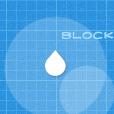
<style>
.page{position:relative;width:114px;height:114px}
.page>*{position:absolute;margin:0}
.t1{font:8px "FanboyHardcore";letter-spacing:0.05em;color:#a8dcfd}
</style>
<div class="page">
<p class="t1" style="left:62px;top:31px;width:52px;height:9px">block</p>
</div>
